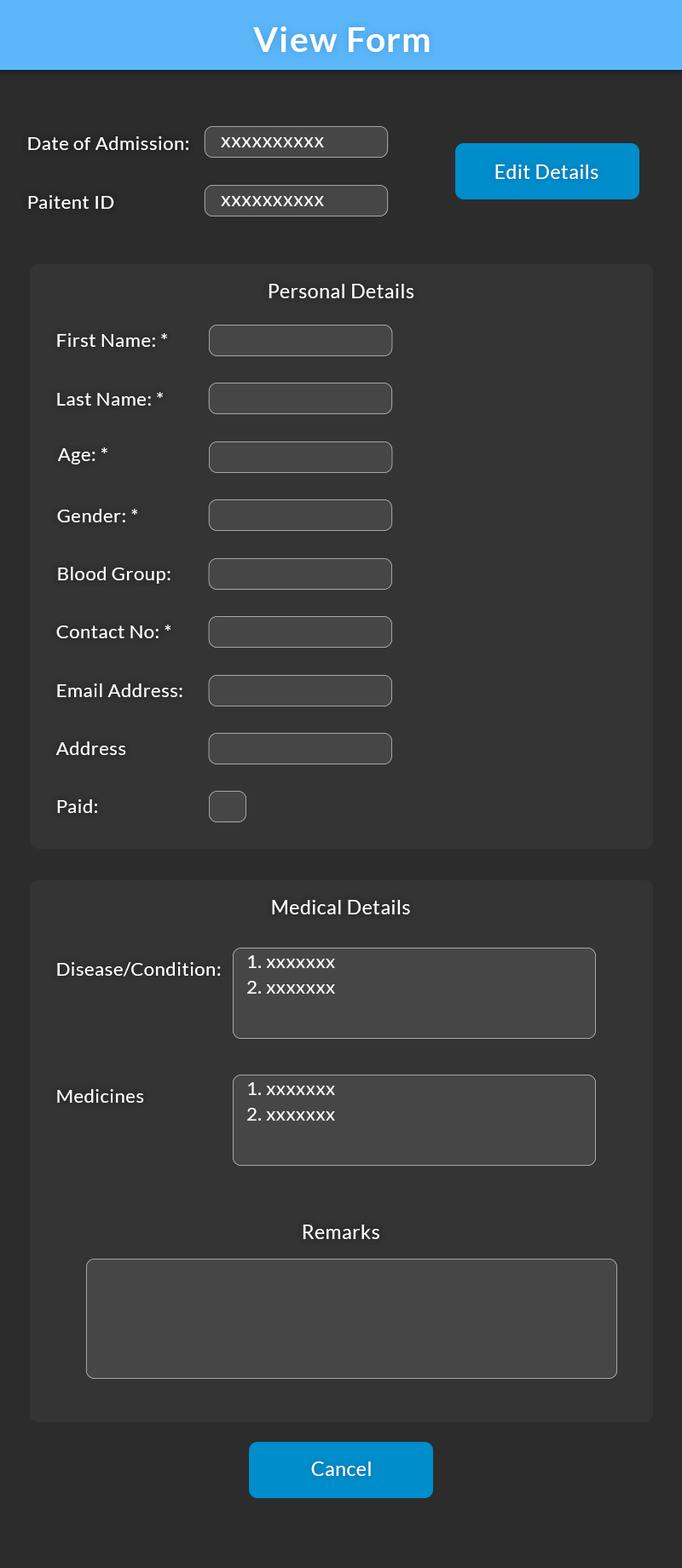
<style>
.page{position:relative;width:682px;height:1568px;background:#343434}
.page>*{position:absolute;margin:0}
.t1{font:35.3px "Lato-Bold";letter-spacing:0.025em;color:#ffffff}
.t2{font:18.7px "Lato-Regular";letter-spacing:0.025em;color:#ffffff}
.t3{font:19.6px "Lato-Regular";letter-spacing:0.025em;color:#ffffff}
</style>
<div class="page">
<p class="t1" style="left:253px;top:26px;width:176px;height:26px">View Form</p>
<p class="t2" style="left:28px;top:136px;width:160px;height:14px">Date of Admission:</p>
<p class="t3" style="left:221px;top:137px;width:103px;height:10px">xxxxxxxxxx</p>
<p class="t3" style="left:495px;top:164px;width:103px;height:15px">Edit Details</p>
<p class="t2" style="left:28px;top:195px;width:86px;height:14px">Paitent ID</p>
<p class="t3" style="left:221px;top:196px;width:103px;height:10px">xxxxxxxxxx</p>
<p class="t3" style="left:268px;top:284px;width:146px;height:14px">Personal Details</p>
<p class="t2" style="left:57px;top:333px;width:110px;height:14px">First Name: *</p>
<p class="t2" style="left:57px;top:392px;width:106px;height:14px">Last Name: *</p>
<p class="t2" style="left:58px;top:447px;width:49px;height:17px">Age: *</p>
<p class="t2" style="left:57px;top:509px;width:80px;height:13px">Gender: *</p>
<p class="t2" style="left:58px;top:567px;width:112px;height:17px">Blood Group:</p>
<p class="t2" style="left:56px;top:625px;width:114px;height:13px">Contact No: *</p>
<p class="t2" style="left:57px;top:683px;width:125px;height:14px">Email Address:</p>
<p class="t2" style="left:56px;top:741px;width:70px;height:14px">Address</p>
<p class="t2" style="left:57px;top:799px;width:40px;height:14px">Paid:</p>
<p class="t3" style="left:272px;top:900px;width:138px;height:14px">Medical Details</p>
<p class="t2" style="left:57px;top:962px;width:164px;height:15px">Disease/Condition:</p>
<p class="t2" style="left:248px;top:955px;width:87px;height:13px">1. xxxxxxx</p>
<p class="t2" style="left:247px;top:981px;width:88px;height:13px">2. xxxxxxx</p>
<p class="t2" style="left:248px;top:1082px;width:87px;height:13px">1. xxxxxxx</p>
<p class="t2" style="left:57px;top:1089px;width:87px;height:14px">Medicines</p>
<p class="t2" style="left:247px;top:1108px;width:88px;height:13px">2. xxxxxxx</p>
<p class="t3" style="left:303px;top:1225px;width:76px;height:14px">Remarks</p>
<p class="t3" style="left:311px;top:1461px;width:60px;height:15px">Cancel</p>
</div>
